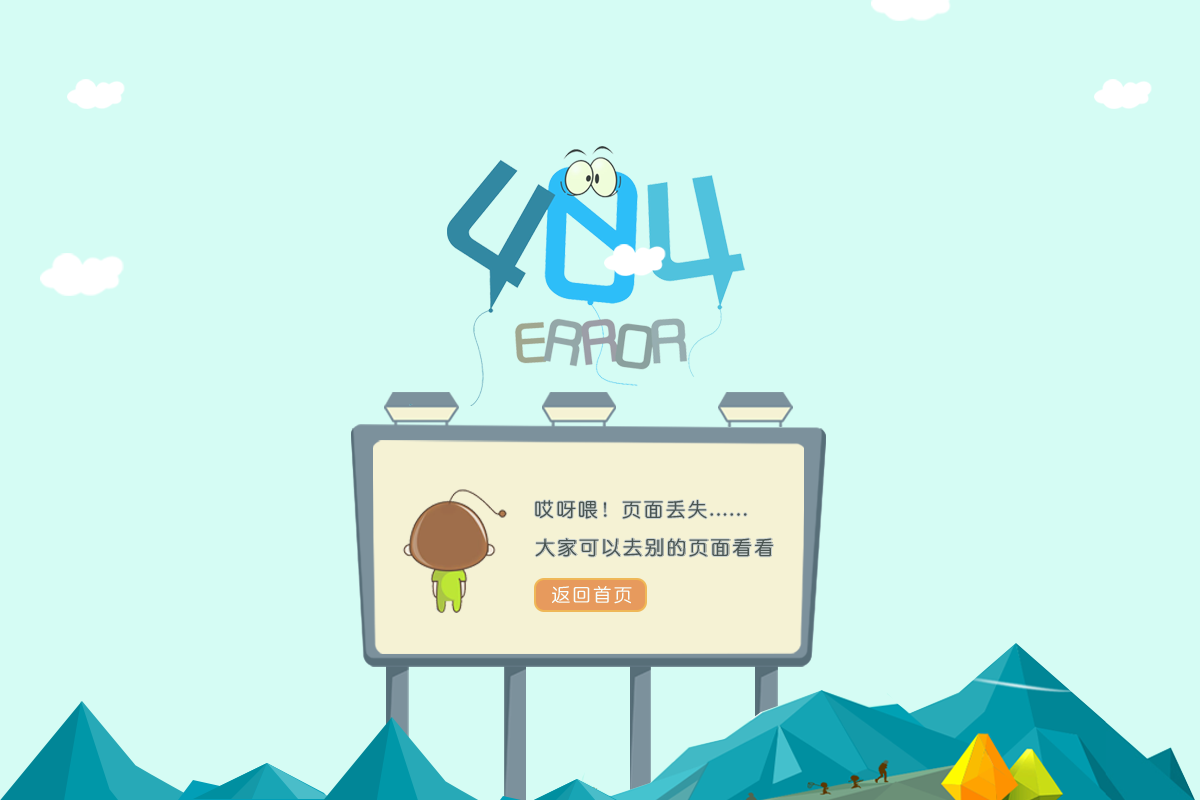
<style>
.page{position:relative;width:1200px;height:800px;background:#d5fcf4}
.page>*{position:absolute;margin:0}
.t1{font:20px "Tensentype-JiaLiZhongYuanJ";letter-spacing:0.095em;color:#4a5552;text-transform:uppercase}
.t2{font:20px "Tensentype-JiaLiZhongYuanJ";letter-spacing:0.095em;text-transform:uppercase}
.t3{font:19px "Tensentype-JiaLiZhongYuanJ";letter-spacing:0.095em;color:#ffffff;text-transform:uppercase}
</style>
<div class="page">
<p class="t1" style="left:535px;top:500px;width:212px;height:19px">哎呀喂！页面丢失......</p>
<p class="t1" style="left:535px;top:500px;width:212px;height:19px">哎呀喂！页面丢失......</p>
<p class="t1" style="left:535px;top:538px;width:238px;height:19px">大家可以去别的页面看看</p>
<p class="t2" style="left:536px;top:538px;width:238px;height:19px">大家可以去别的页面看看</p>
<p class="t3" style="left:552px;top:586px;width:80px;height:18px">返回首页</p>
</div>
